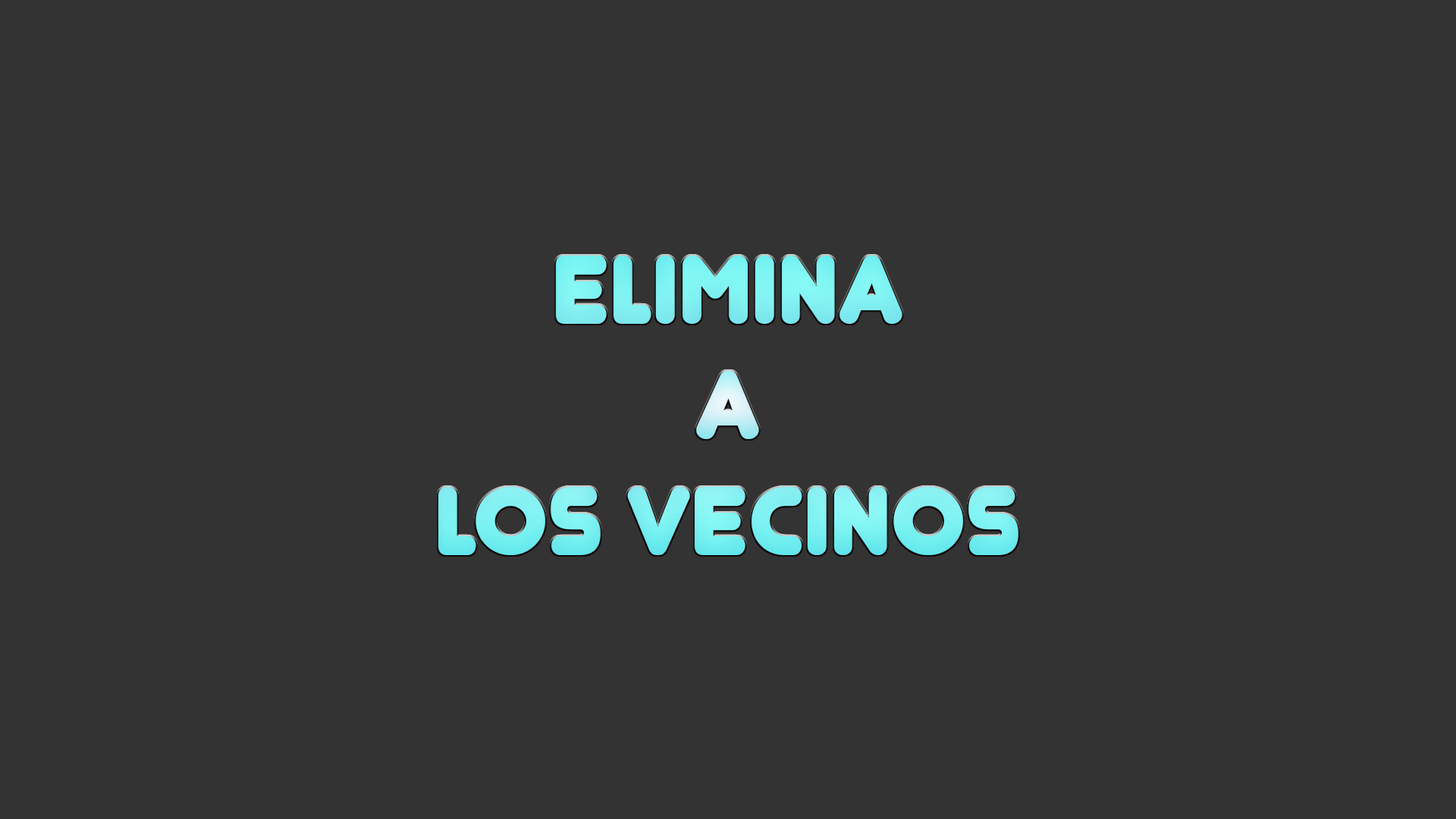
<style>
.page{position:relative;width:1456px;height:819px;background:#333333}
.page>*{position:absolute;margin:0}
.t1{font:96.3px "Junegull-Regular";color:#80f1f2}
</style>
<div class="page">
<p class="t1" style="left:438px;top:256px;width:580px;height:299px;text-align:center">Elimina<br>a<br>Los vecinos</p>
</div>
